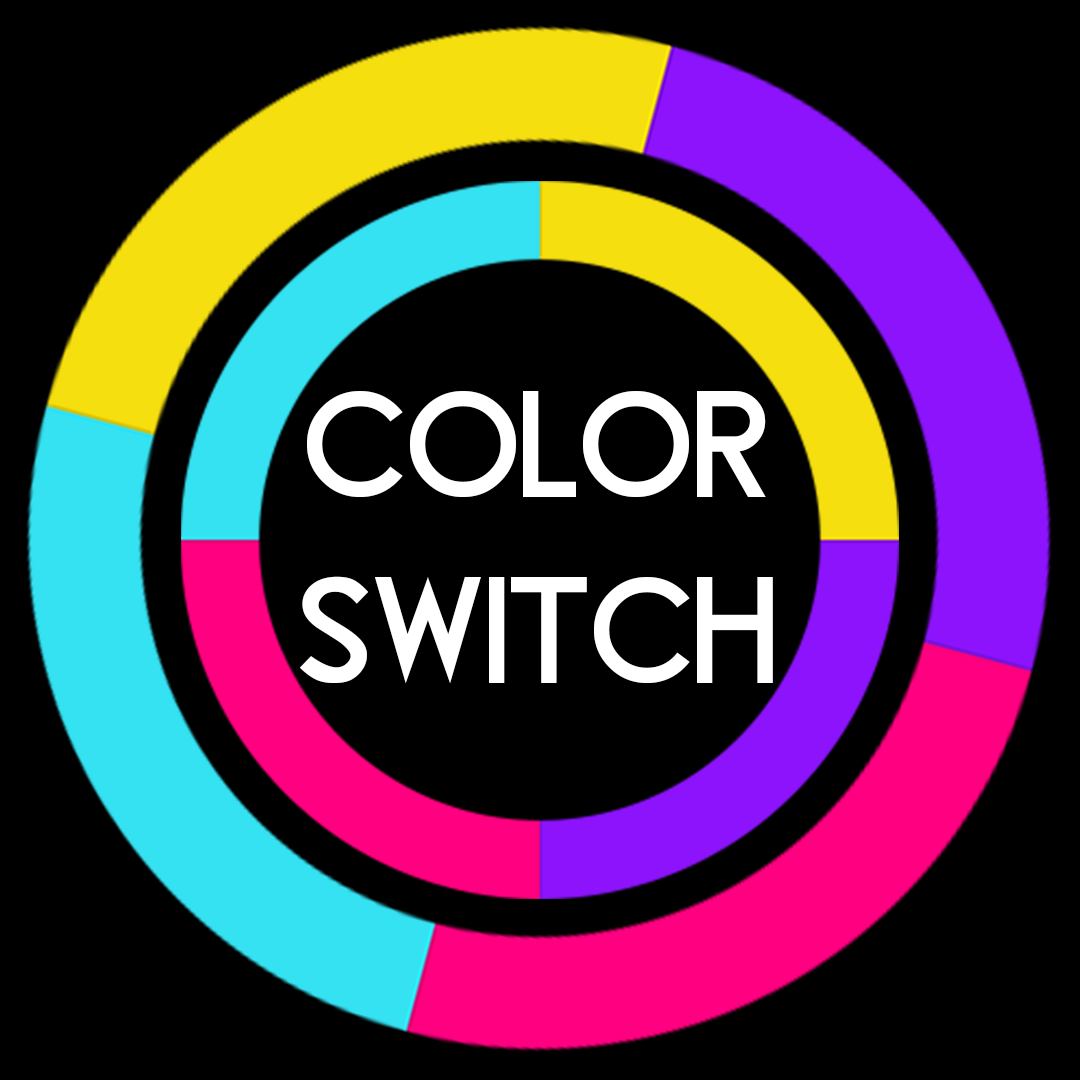
<style>
.page{position:relative;width:1080px;height:1080px;background:#000000}
.page>*{position:absolute;margin:0}
.t1{font:154.7px "BlissfulThinking";color:#ffffff}
</style>
<div class="page">
<p class="t1" style="left:300px;top:391px;width:473px;height:292px;text-align:center">COLOR<br>SWITCH</p>
</div>
